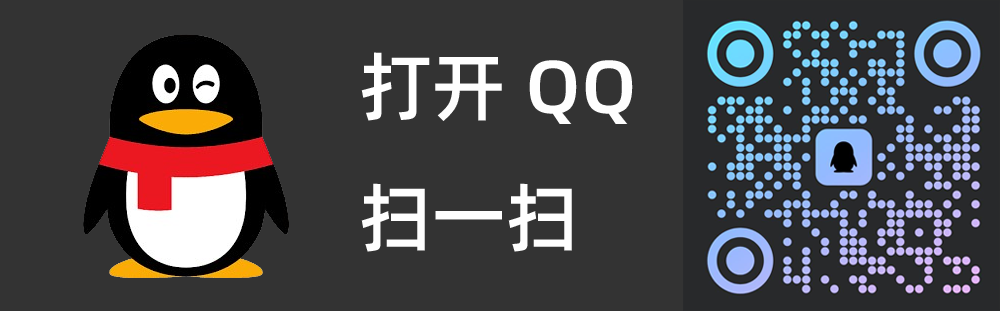
<style>
.page{position:relative;width:1000px;height:311px;background:#333333}
.page>*{position:absolute;margin:0}
.t1{font:75px "AlibabaPuHuiTi_3_75_SemiBold";color:#fefefe}
</style>
<div class="page">
<p class="t1" style="left:361px;top:52px;width:272px;height:200px">打开QQ<br>扫一扫</p>
</div>
